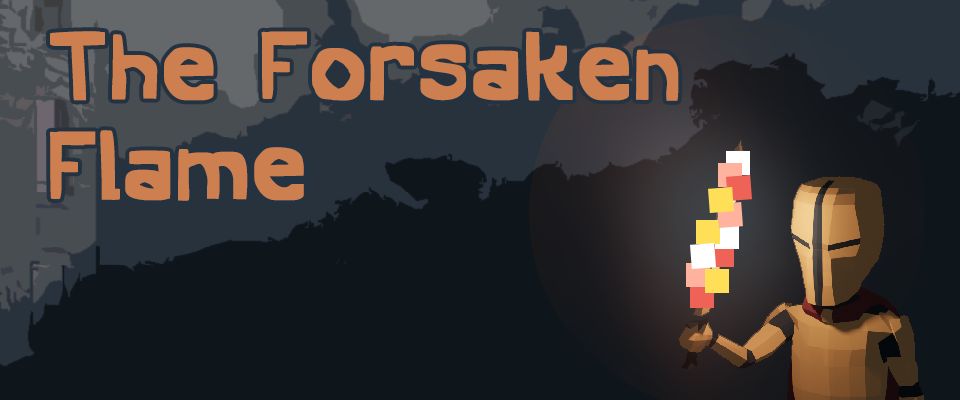
<style>
.page{position:relative;width:960px;height:400px;background:#0e151b}
.page>*{position:absolute;margin:0}
.t1{font:100px/100px "Anglerhand";color:#cd7f4f}
</style>
<div class="page">
<p class="t1" style="left:50px;top:31px;width:629px;height:170px">The Forsaken<br>Flame</p>
</div>
